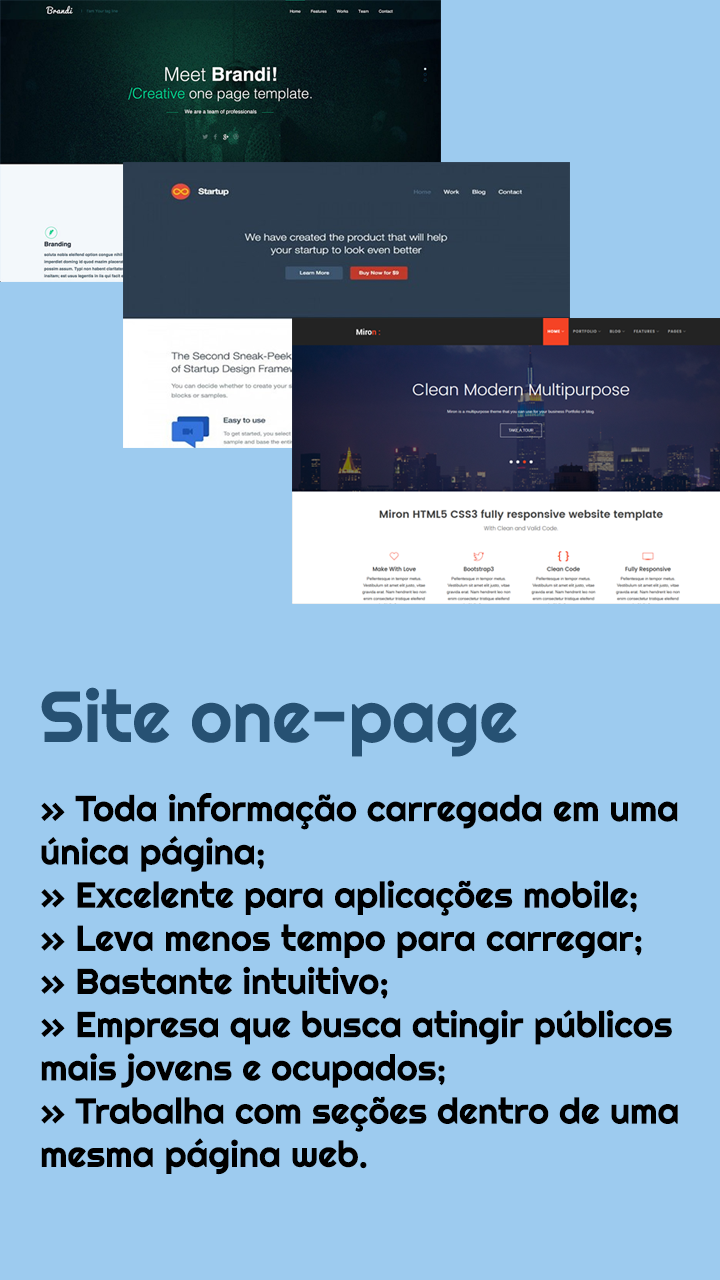
<style>
.page{position:relative;width:720px;height:1280px;background:#9dcbef}
.page>*{position:absolute;margin:0}
.t1{font:36px "Righteous-Regular";color:#000000}
.t2{font:72px "Righteous-Regular";color:#265173}
</style>
<div class="page">
<p class="t1" style="left:41px;top:687px;width:637px;height:488px"><span class="t2">Site one-page<br><br></span>» Toda informação carregada em uma<br>única página;<br>» Excelente para aplicações mobile;<br>» Leva menos tempo para carregar;<br>» Bastante intuitivo;<br>» Empresa que busca atingir públicos<br>mais jovens e ocupados;<br>» Trabalha com seções dentro de uma<br>mesma página web.</p>
</div>
